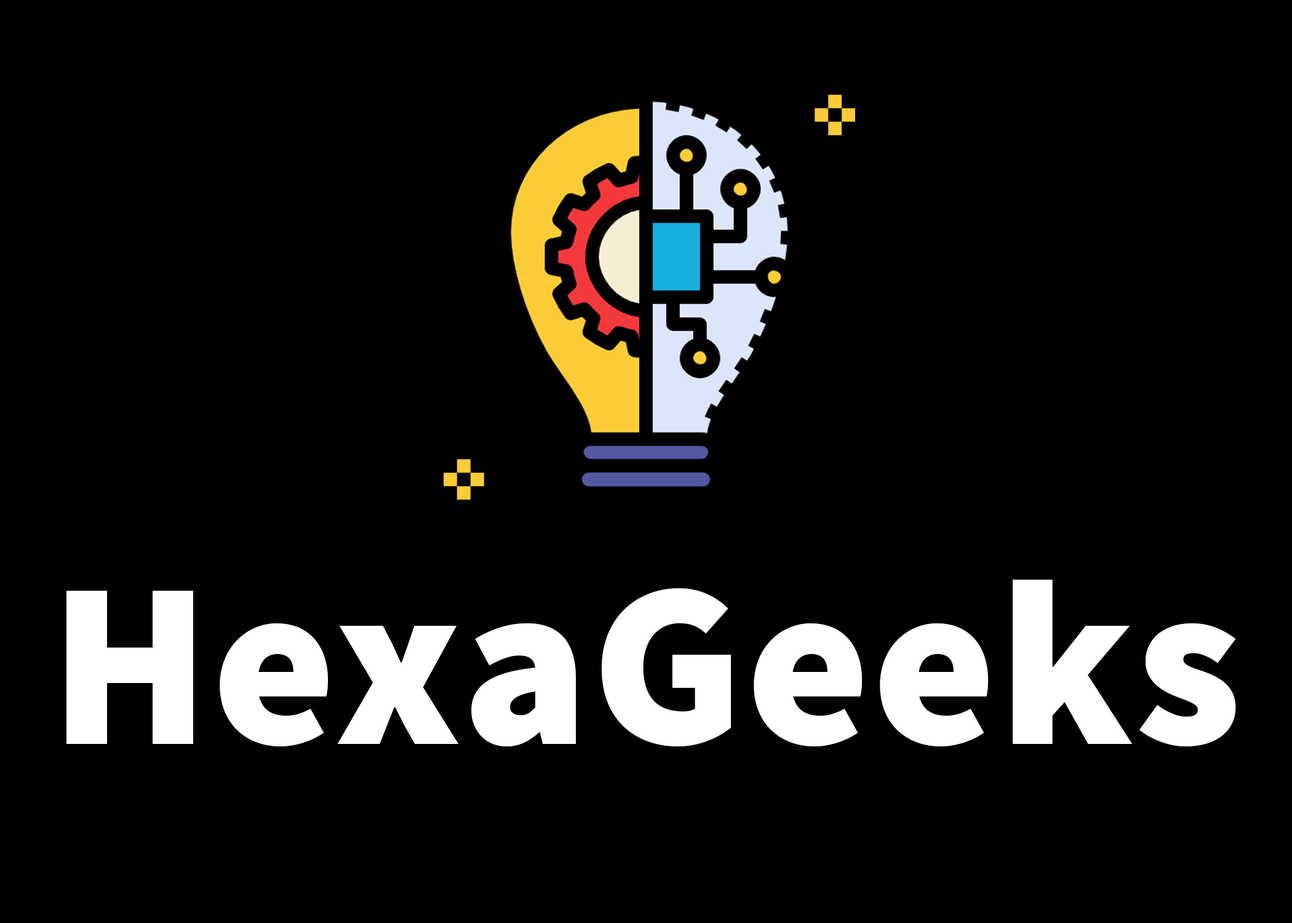
<style>
.page{position:relative;width:1292px;height:923px;background:#000000}
.page>*{position:absolute;margin:0}
.t1{font:235.9px "SourceSansPro-Black";letter-spacing:0.01em;color:#ffffff}
</style>
<div class="page">
<p class="t1" style="left:66px;top:580px;width:1170px;height:166px">HexaGeeks</p>
<p class="t1" style="left:66px;top:580px;width:1170px;height:166px">HexaGeeks</p>
</div>
